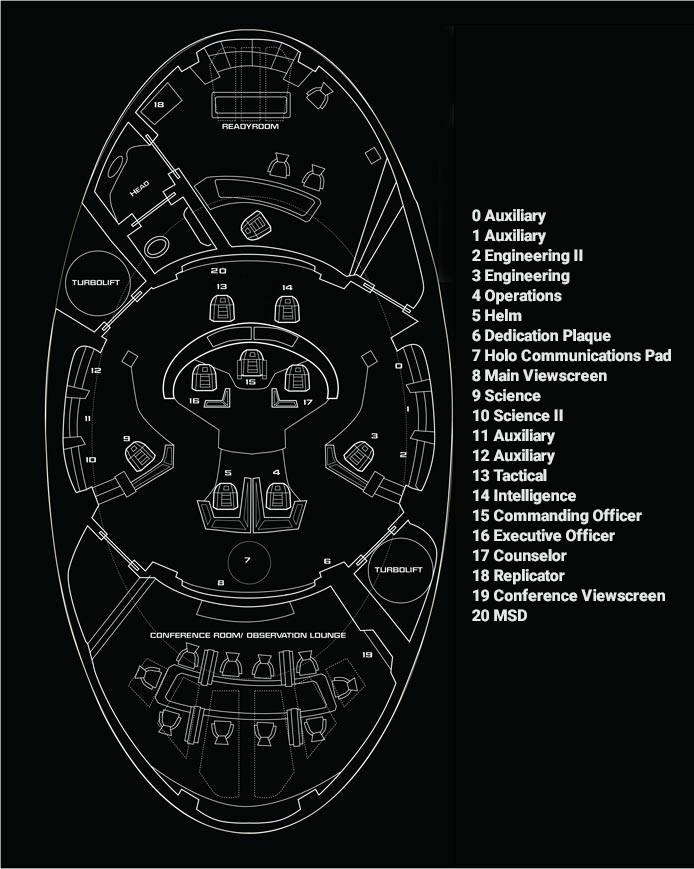
<style>
.page{position:relative;width:694px;height:869px;background:#050706}
.page>*{position:absolute;margin:0}
.t1{font:16px/20px "Roboto-Black";letter-spacing:-0.005em;color:#e2eae6}
</style>
<div class="page">
<p class="t1" style="left:472px;top:209px;width:199px;height:413px">0 Auxiliary<br>1 Auxiliary<br>2 Engineering II<br>3 Engineering<br>4 Operations<br>5 Helm<br>6 Dedication Plaque<br>7 Holo Communications Pad<br>8 Main Viewscreen<br>9 Science<br>10 Science II<br>11 Auxiliary<br>12 Auxiliary<br>13 Tactical<br>14 Intelligence<br>15 Commanding Officer<br>16 Executive Officer<br>17 Counselor<br>18 Replicator<br>19 Conference Viewscreen<br>20 MSD</p>
</div>
